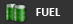
<style>
.page{position:relative;width:73px;height:24px;background:#333333}
.page>*{position:absolute;margin:0}
.t1{font:12px "Calibri-Bold";color:#fefefe}
</style>
<div class="page">
<p class="t1" style="left:36px;top:8px;width:25px;height:8px">FUEL</p>
</div>
